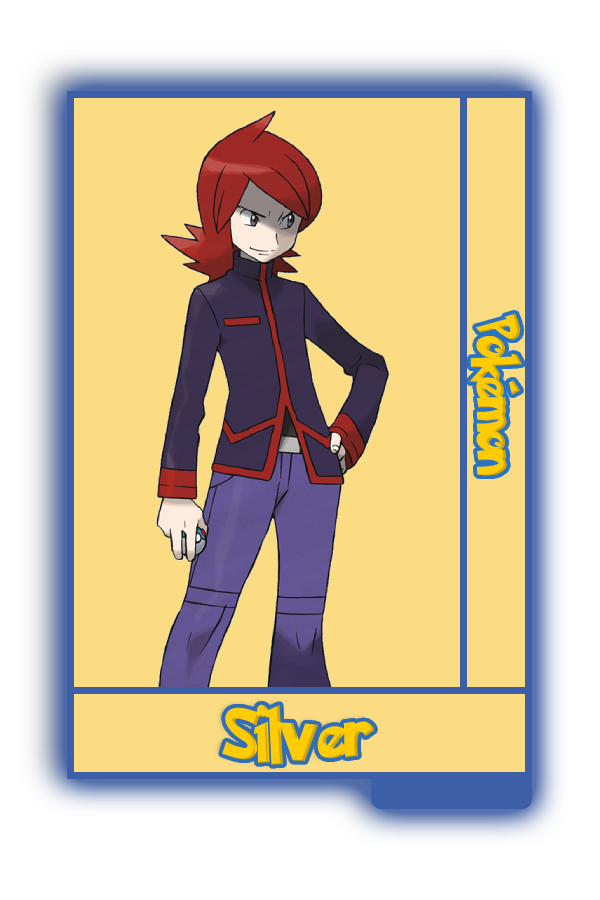
<style>
.page{position:relative;width:600px;height:900px;background:#fbdc83}
.page>*{position:absolute;margin:0}
.t1{font:48.8px "PokemonSolidNormal";color:#ffcb05;scale:0.8 1}
.t2{font:56.6px "PokemonSolidNormal";color:#ffcb05;scale:0.92 1}
</style>
<div class="page">
<p class="t1" style="left:469px;top:313px;width:54px;height:163px;rotate:90deg">Pokémon</p>
<p class="t2" style="left:222px;top:704px;width:153px;height:61px">Silver</p>
</div>
